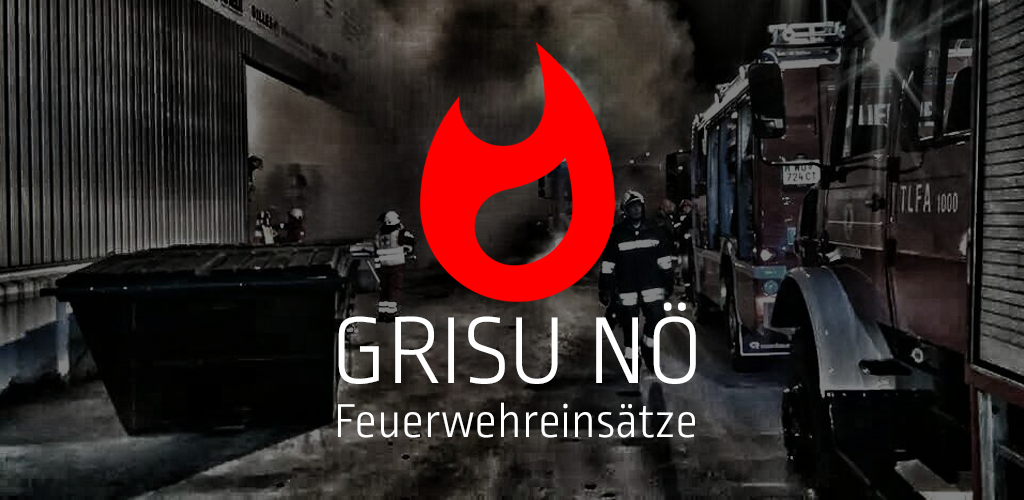
<style>
.page{position:relative;width:1024px;height:500px}
.page>*{position:absolute;margin:0}
.t1{font:100px "RopaSansPro-Light";color:#ffffff}
.t2{font:50.1px "RopaSansPro-Light";color:#ffffff}
</style>
<div class="page">
<p class="t1" style="left:338px;top:302px;width:358px;height:82px">GRISU NÖ</p>
<p class="t2" style="left:338px;top:402px;width:357px;height:36px">Feuerwehreinsätze</p>
</div>
